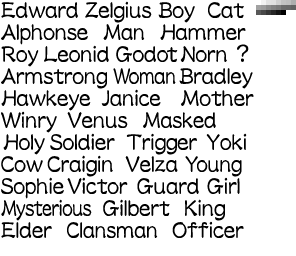
<style>
.page{position:relative;width:296px;height:256px;background:#ffffff}
.page>*{position:absolute;margin:0}
.t1{font:26.6px/22px "DFLeiSho-SB-WINP-RKSJ-H";color:#000000;scale:0.84 1}
.t2{font:26.6px/22px "DFLeiSho-SB-WINP-RKSJ-H";color:#000000;scale:0.8 1}
.t3{font:26.6px/22px "DFLeiSho-SB-WINP-RKSJ-H";color:#000000;scale:0.82 1}
.t4{font:26.6px/22px "DFLeiSho-SB-WINP-RKSJ-H";letter-spacing:-0.075em;color:#000000;scale:0.84 1}
.t5{font:26.6px/22px "DFLeiSho-SB-WINP-RKSJ-H";letter-spacing:-0.075em;color:#000000;scale:0.71 1}
.t6{font:26.6px/22px "DFLeiSho-SB-WINP-RKSJ-H";color:#000000;scale:0.77 1}
.t7{font:26.6px/22px "DFLeiSho-SB-WINP-RKSJ-H";letter-spacing:-0.025em;color:#000000;scale:0.68 1}
.t8{font:26.6px/22px "DFLeiSho-SB-WINP-RKSJ-H";color:#000000;scale:0.74 1}
.t9{font:26.6px/22px "DFLeiSho-SB-WINP-RKSJ-H";letter-spacing:-0.075em;color:#000000;scale:0.8 1}
.t10{font:26.6px/22px "DFLeiSho-SB-WINP-RKSJ-H";color:#000000;scale:0.81 1}
.t11{font:26.6px/22px "DFLeiSho-SB-WINP-RKSJ-H";letter-spacing:-0.01em;color:#000000;scale:0.81 1}
.t12{font:26.6px/22px "DFLeiSho-SB-WINP-RKSJ-H";letter-spacing:-0.05em;color:#000000;scale:0.71 1}
.t13{font:26.6px/22px "DFLeiSho-SB-WINP-RKSJ-H";letter-spacing:-0.01em;color:#000000;scale:0.74 1}
.t14{font:26.6px/22px "DFLeiSho-SB-WINP-RKSJ-H";letter-spacing:-0.05em;color:#000000;scale:0.77 1}
.t15{font:26.6px/22px "DFLeiSho-SB-WINP-RKSJ-H";letter-spacing:-0.01em;color:#000000;scale:0.71 1}
.t16{font:26.6px/22px "DFLeiSho-SB-WINP-RKSJ-H";letter-spacing:-0.025em;color:#000000;scale:0.74 1}
</style>
<div class="page">
<p class="t1" style="left:1px;top:1px;width:253px;height:237px">Edward Zelgius Boy  Cat<br>Alphonse  <span class="t2">M</span><span class="t3">an</span>  Hammer<br>Roy Leonid God<span class="t4">o</span>t Norn  ?<br>Armstrong  <span class="t5">W</span><span class="t6">o</span><span class="t7">m</span><span class="t6">a</span><span class="t8">n </span>Bradley<br>Hawkeye   Janice   Mother<br>Winry    Venus  <span class="t2">M</span><span class="t3">asked<br> </span>Holy Soldier     Trigger   Yoki<br>Cow  Craigin     Velza <span class="t9">Y</span><span class="t10">o</span><span class="t11">un</span><span class="t10">g<br></span>Sophie Victor  Guard Girl<br><span class="t12">M</span><span class="t13">y</span><span class="t14">s</span><span class="t13">t</span><span class="t15">e</span><span class="t13">rio</span><span class="t16">u</span><span class="t13">s  </span>Gilbert  King<br>Elder  <span class="t2">C</span><span class="t3">l</span><span class="t10">ansman  </span>Officer</p>
</div>
